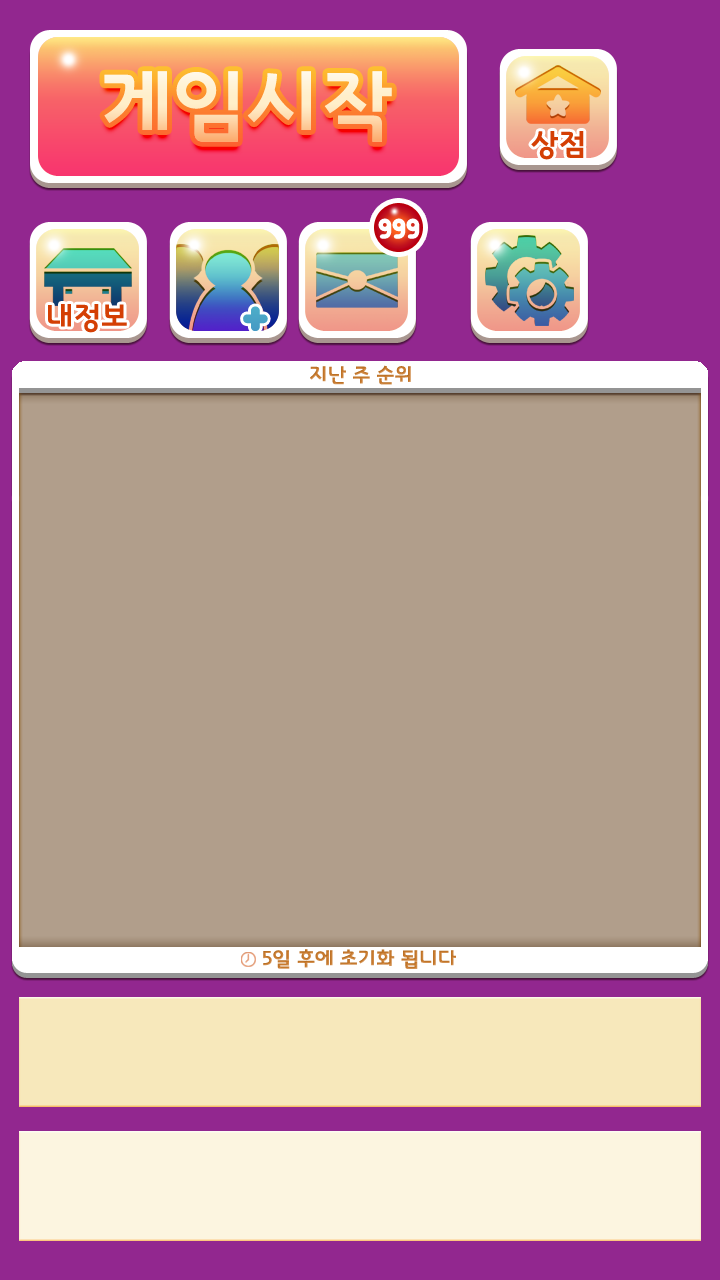
<style>
.page{position:relative;width:720px;height:1280px;background:#b19e8b}
.page>*{position:absolute;margin:0}
.t1{font:79.2px "InterGTB";color:#ffefca}
.t2{font:30px "InterGTB";color:#d43f04}
.t3{font:31.2px "Arista";color:#ffffff}
.t4{font:62.4px "Arista";color:#49a4c6}
.t5{font:20px "InterGTB";color:#c87a2e}
</style>
<div class="page">
<p class="t1" style="left:104px;top:71px;width:288px;height:71px">게임시작</p>
<p class="t2" style="left:531px;top:131px;width:53px;height:29px">상점</p>
<p class="t3" style="left:378px;top:218px;width:42px;height:21px">999</p>
<p class="t2" style="left:48px;top:304px;width:79px;height:29px">내정보</p>
<p class="t4" style="left:243px;top:306px;width:25px;height:25px">+</p>
<p class="t5" style="left:310px;top:365px;width:101px;height:20px">지난 주 순위</p>
<p class="t5" style="left:263px;top:949px;width:193px;height:20px">5일 후에 초기화 됩니다</p>
</div>
